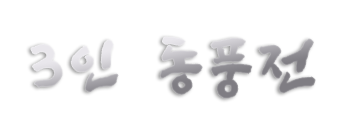
<style>
.page{position:relative;width:360px;height:120px;background:#ffffff}
.page>*{position:absolute;margin:0}
.t1{font:65.6px "SangSangRockOTF";letter-spacing:0.12em}
.t2{font:59.6px "SangSangRockOTF";letter-spacing:0.12em}
</style>
<div class="page">
<p class="t1" style="left:31px;top:37px;width:284px;height:61px">3인 동<span class="t2">풍</span>전</p>
</div>
